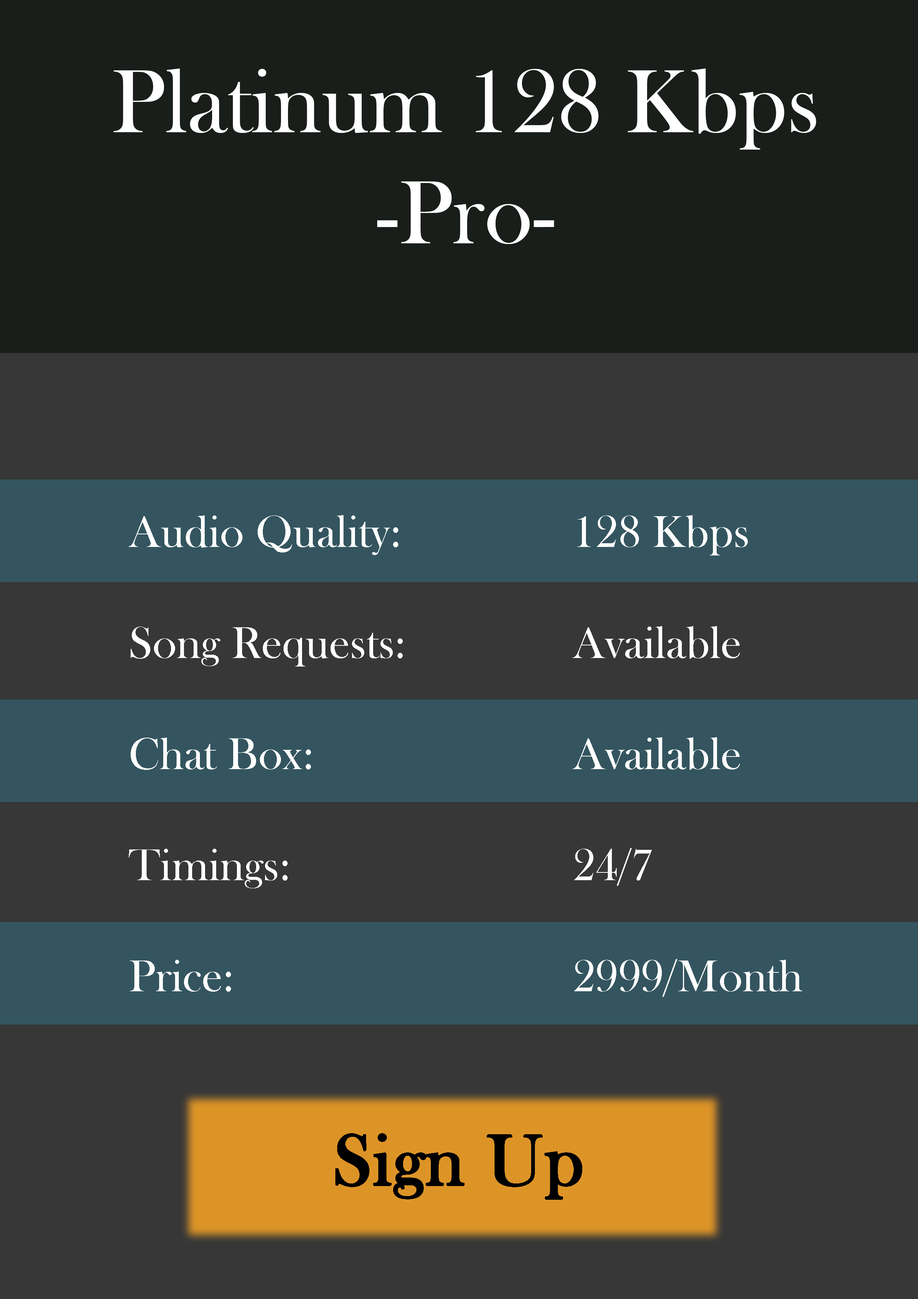
<style>
.page{position:relative;width:918px;height:1299px;background:#373737}
.page>*{position:absolute;margin:0}
.t1{font:92.6px "BaskOldFace";color:#ffffff}
.t2{font:46.3px "BaskOldFace";color:#ffffff}
.t3{font:74px "BaskOldFace";color:#000000;font-weight:bold}
</style>
<div class="page">
<p class="t1" style="left:114px;top:68px;width:702px;height:176px;text-align:center">Platinum 128 Kbps<br>-Pro-</p>
<p class="t2" style="left:128px;top:515px;width:275px;height:476px">Audio Quality:<br><br>Song Requests:<br><br>Chat Box: <br><br>Timings:<br><br>Price:</p>
<p class="t2" style="left:572px;top:515px;width:231px;height:482px">128 Kbps<br><br>Available<br><br>Available<br><br>24/7<br><br>2999/Month</p>
<p class="t3" style="left:335px;top:1133px;width:247px;height:67px">Sign Up</p>
</div>
